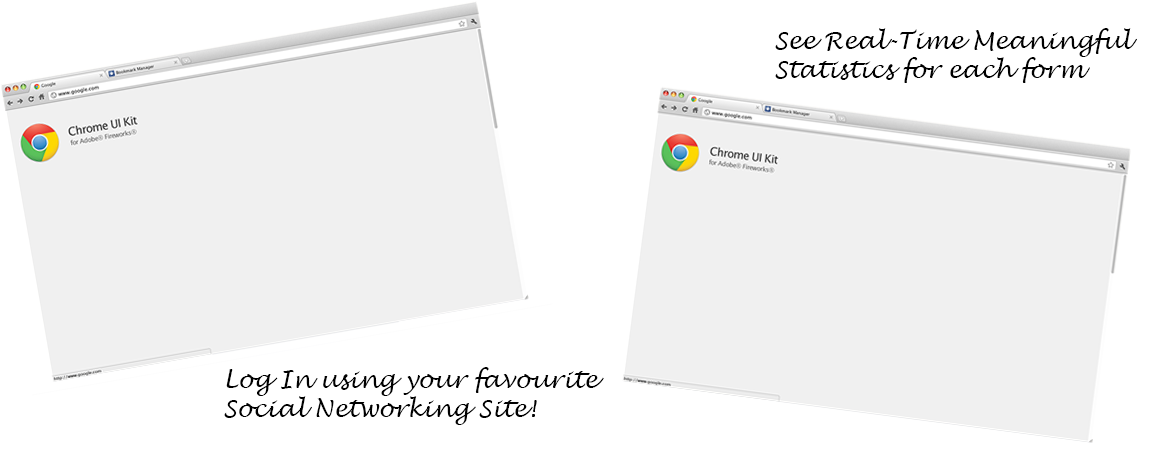
<style>
.page{position:relative;width:1150px;height:450px;background:#f0f0f0}
.page>*{position:absolute;margin:0}
.t1{font:24px "LucidaHandwriting-Italic";color:#000000}
</style>
<div class="page">
<p class="t1" style="left:775px;top:28px;width:362px;height:55px">See Real-Time Meaningful<br>Statistics for each form</p>
<p class="t1" style="left:224px;top:367px;width:380px;height:58px">Log In using your favourite<br>Social Networking Site!</p>
</div>
